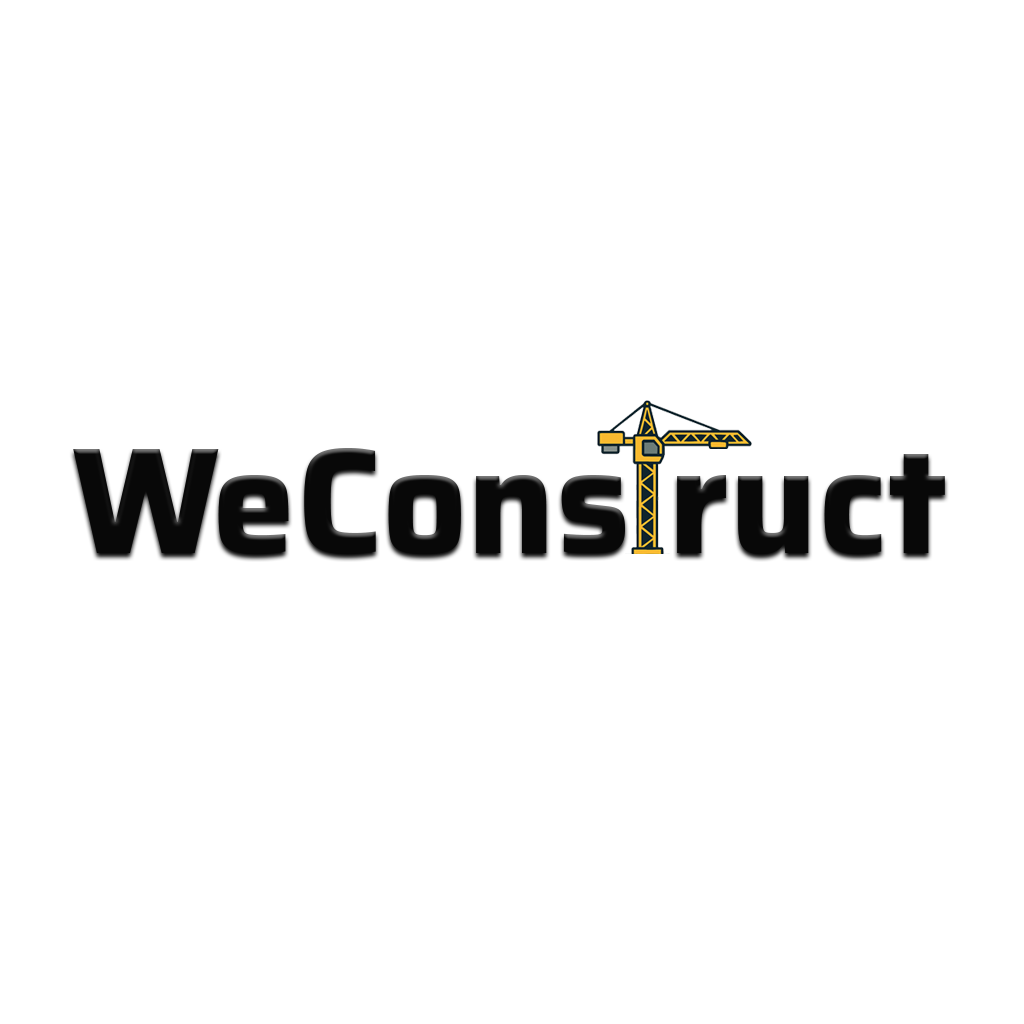
<style>
.page{position:relative;width:1024px;height:1024px;background:#ffffff}
.page>*{position:absolute;margin:0}
.t1{font:150px "Saira-Bold";color:#000000}
</style>
<div class="page">
<p class="t1" style="left:73px;top:448px;width:872px;height:106px;opacity:0.97">WeCons ruct</p>
</div>
